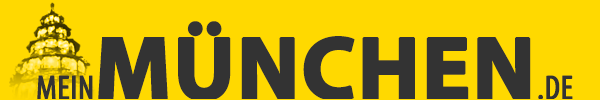
<style>
.page{position:relative;width:600px;height:100px;background:#ffd900}
.page>*{position:absolute;margin:0}
.t1{font:90px "MyriadPro-Bold";color:#333333;text-transform:uppercase;font-weight:bold}
.t2{font:34px "MyriadPro-Cond";color:#333333;text-transform:uppercase;font-weight:bold}
</style>
<div class="page">
<p class="t1" style="left:37px;top:21px;width:536px;height:81px"><span class="t2">Mein</span>MÜNCHEN<span class="t2">.de</span></p>
</div>
